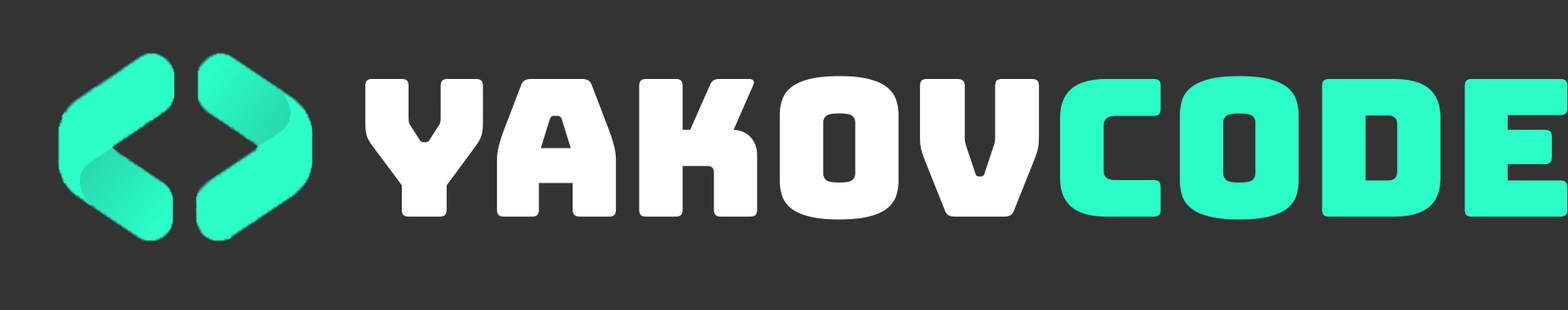
<style>
.page{position:relative;width:1568px;height:310px;background:#333333}
.page>*{position:absolute;margin:0}
.t1{font:191.1px "Bungee-Regular";color:#ffffff}
.t2{font:191.1px "Bungee-Regular";color:#2afdc7}
</style>
<div class="page">
<p class="t1" style="left:365px;top:76px;width:1203px;height:144px">Yakov<span class="t2">code</span></p>
</div>
